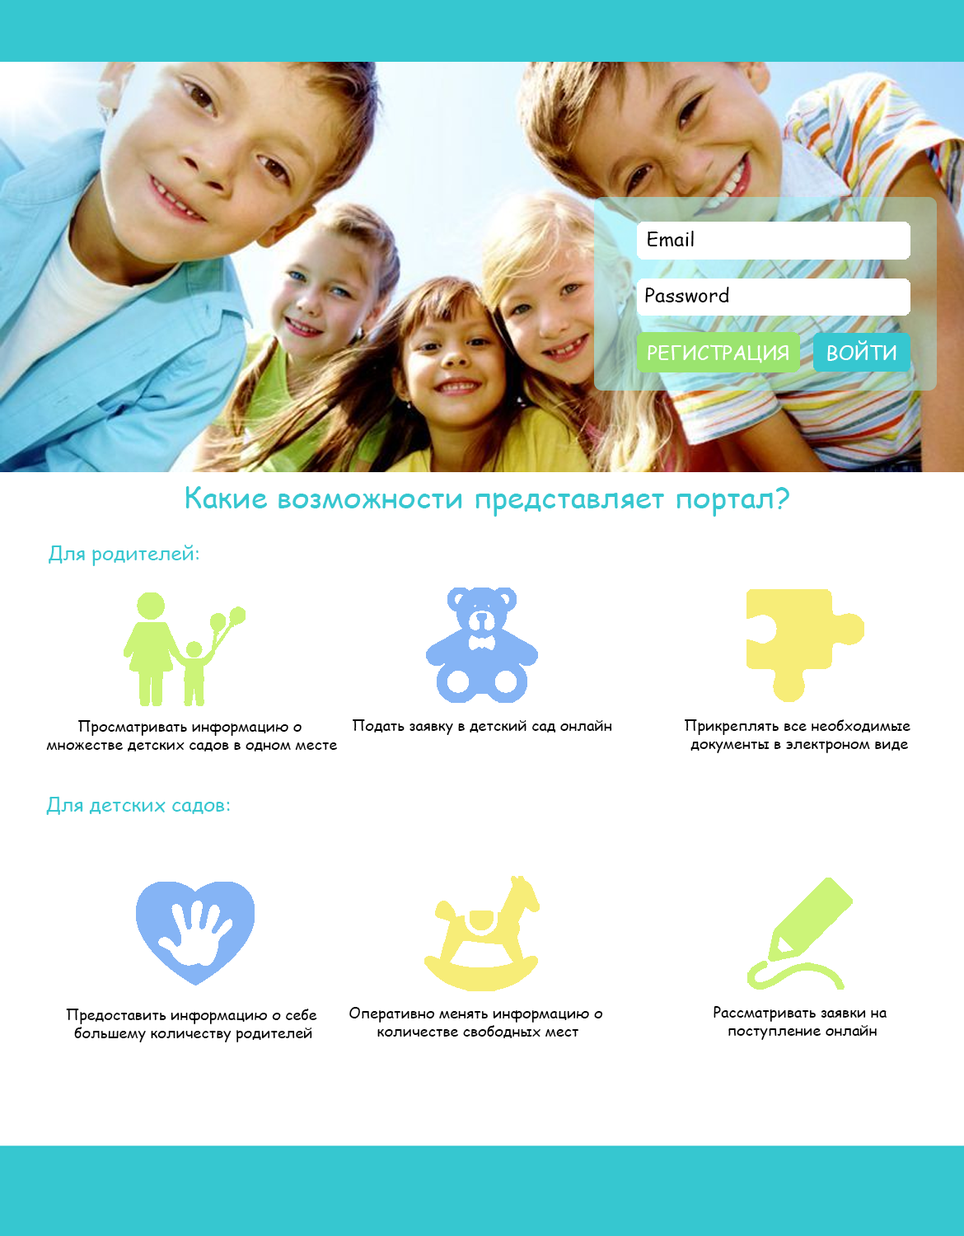
<style>
.page{position:relative;width:964px;height:1236px;background:#ffffff}
.page>*{position:absolute;margin:0}
.t1{font:19.8px "ComicSansMS";color:#000000}
.t2{font:19.8px "ComicSansMS";color:#ffffff}
.t3{font:29.7px "ComicSansMS";color:#36c7d0}
.t4{font:19.8px "ComicSansMS";color:#36c7d0}
.t5{font:14.8px "ComicSansMS";color:#000000}
</style>
<div class="page">
<p class="t1" style="left:648px;top:231px;width:46px;height:15px">Email</p>
<p class="t1" style="left:645px;top:287px;width:84px;height:16px">Password</p>
<p class="t2" style="left:828px;top:340px;width:69px;height:21px">ВОЙТИ</p>
<p class="t2" style="left:648px;top:345px;width:141px;height:19px">РЕГИСТРАЦИЯ</p>
<p class="t3" style="left:185px;top:486px;width:605px;height:31px">Какие возможности представляет портал?</p>
<p class="t4" style="left:49px;top:545px;width:150px;height:21px">Для родителей:</p>
<p class="t5" style="left:46px;top:720px;width:291px;height:32px;text-align:center">Просматривать информацию о <br>множестве детских садов в одном месте</p>
<p class="t5" style="left:353px;top:720px;width:259px;height:15px">Подать заявку в детский сад онлайн</p>
<p class="t5" style="left:685px;top:720px;width:226px;height:33px;text-align:center">Прикреплять все необходимые <br>документы в электроном виде</p>
<p class="t4" style="left:46px;top:796px;width:184px;height:19px">Для детских садов:</p>
<p class="t5" style="left:66px;top:1009px;width:251px;height:34px;text-align:center">Предоставить информацию о себе <br>большему количеству родителей</p>
<p class="t5" style="left:349px;top:1007px;width:254px;height:32px;text-align:center">Оперативно менять информацию о <br>количестве свободных мест</p>
<p class="t5" style="left:714px;top:1006px;width:173px;height:34px;text-align:center">Рассматривать заявки на <br>поступление онлайн</p>
</div>
